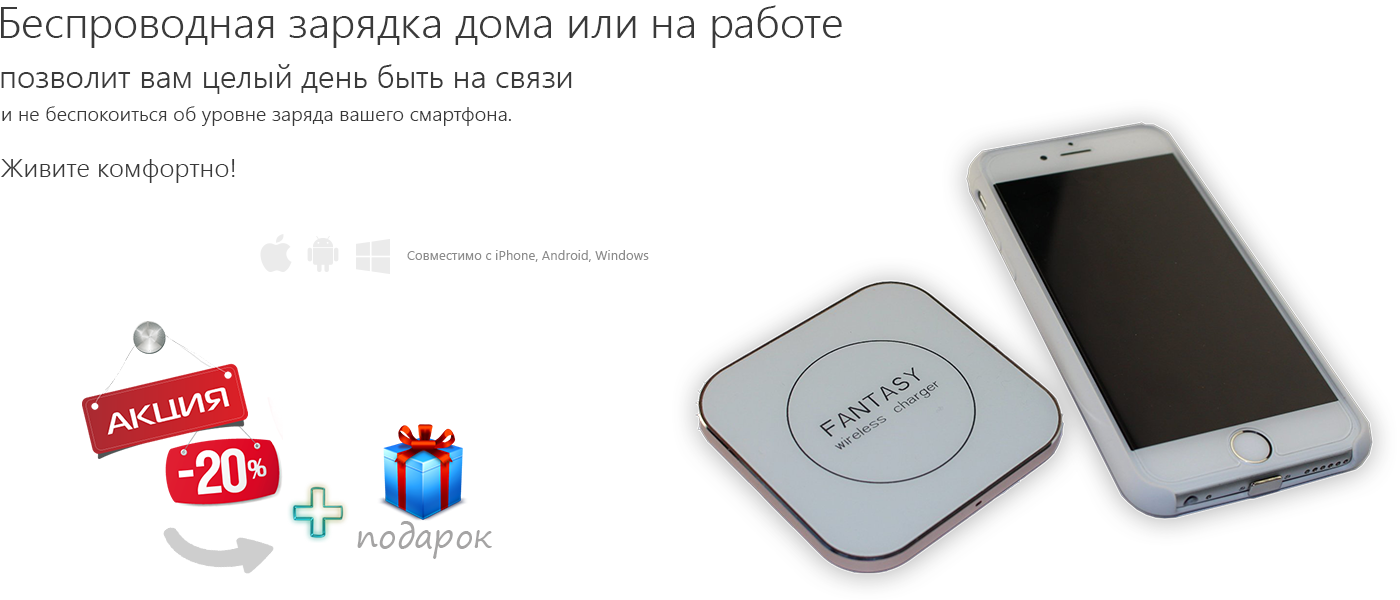
<style>
.page{position:relative;width:1400px;height:600px;background:#ffffff}
.page>*{position:absolute;margin:0}
.t1{font:43.8px "SegoeUI-Semilight";color:#3a3a3a}
.t2{font:31.8px "SegoeUI-Semilight";color:#3a3a3a}
.t3{font:20.2px "SegoeUI-Semilight";color:#3a3a3a}
.t4{font:26.4px "SegoeUI-Semilight";color:#3a3a3a}
.t5{font:33px "SegoePrint";color:#a5a4a4}
</style>
<div class="page">
<p class="t1" style="left:1px;top:5px;width:841px;height:43px">Беспроводная зарядка дома или на работе</p>
<p class="t2" style="left:1px;top:64px;width:571px;height:30px">позволит вам целый день быть на связи</p>
<p class="t3" style="left:2px;top:106px;width:509px;height:20px">и не беспокоиться об уровне заряда вашего смартфона.</p>
<p class="t4" style="left:1px;top:159px;width:234px;height:24px">Живите комфортно!</p>
<p class="t5" style="left:357px;top:521px;width:135px;height:38px">подарок</p>
</div>
